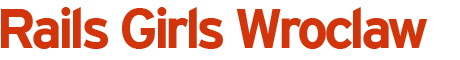
<style>
.page{position:relative;width:460px;height:60px;background:#ffffff}
.page>*{position:absolute;margin:0}
.t1{font:56px "InterstateMono-Bold";letter-spacing:-0.075em;color:#c0432d}
.t2{font:56px "InterstateMono-Bold";letter-spacing:-0.075em;color:#cc3300}
</style>
<div class="page">
<p class="t1" style="left:1px;top:7px;width:427px;height:42px">Rails G<span class="t2">irl</span>s Wroclaw</p>
</div>
